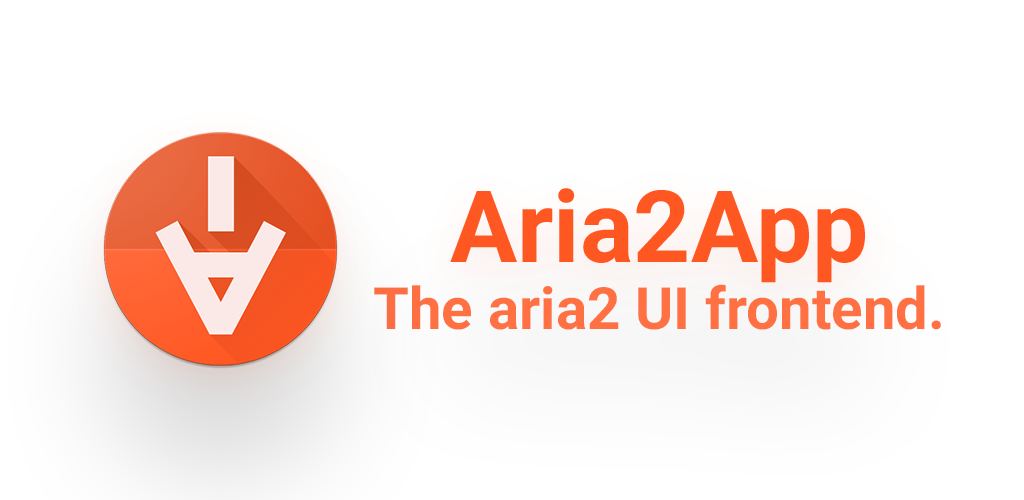
<style>
.page{position:relative;width:1024px;height:500px;background:#ffffff}
.page>*{position:absolute;margin:0}
.t1{font:58.3px "Roboto-Bold";color:#ff7043}
</style>
<div class="page">
<p class="t1" style="left:374px;top:284px;width:567px;height:46px">The aria2 UI frontend.</p>
</div>
